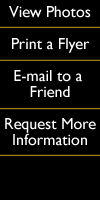
<style>
.page{position:relative;width:100px;height:200px;background:#000000}
.page>*{position:absolute;margin:0}
.t1{font:16px/16px "GillSansMT";color:#ffffff}
</style>
<div class="page">
<p class="t1" style="left:5px;top:6px;width:91px;height:140px;text-align:center">View Photos<br><br>Print a Flyer<br><br>E-mail to a <br>Friend<br><br>Request More<br>Information</p>
</div>
